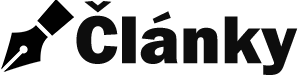
<style>
.page{position:relative;width:301px;height:75px;background:#ffffff}
.page>*{position:absolute;margin:0}
.t1{font:70px "FranklinGothic-Heavy";color:#0d0d0d}
</style>
<div class="page">
<p class="t1" style="left:76px;top:1px;width:222px;height:74px">Články</p>
</div>
